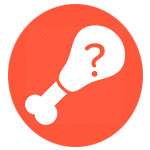
<style>
.page{position:relative;width:150px;height:150px;background:#ffffff}
.page>*{position:absolute;margin:0}
.t1{font:48px "ProximaNovaSoft-Regular";letter-spacing:-0.08em;color:#fe563b;font-weight:bold}
</style>
<div class="page">
<p class="t1" style="left:85px;top:43px;width:20px;height:34px">?</p>
</div>
